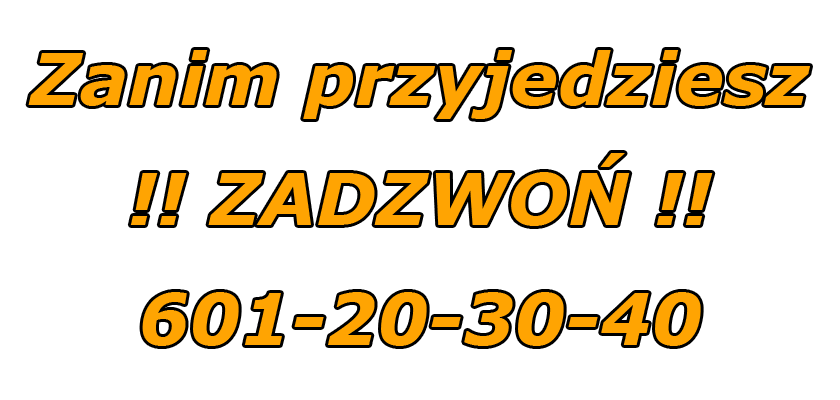
<style>
.page{position:relative;width:840px;height:400px;background:#ffffff}
.page>*{position:absolute;margin:0}
.t1{font:72px/120px "Verdana-BoldItalic";color:#ffa402}
</style>
<div class="page">
<p class="t1" style="left:28px;top:50px;width:782px;height:296px;text-align:center">Zanim przyjedziesz<br>!! ZADZWOŃ !!<br>601-20-30-40</p>
</div>
